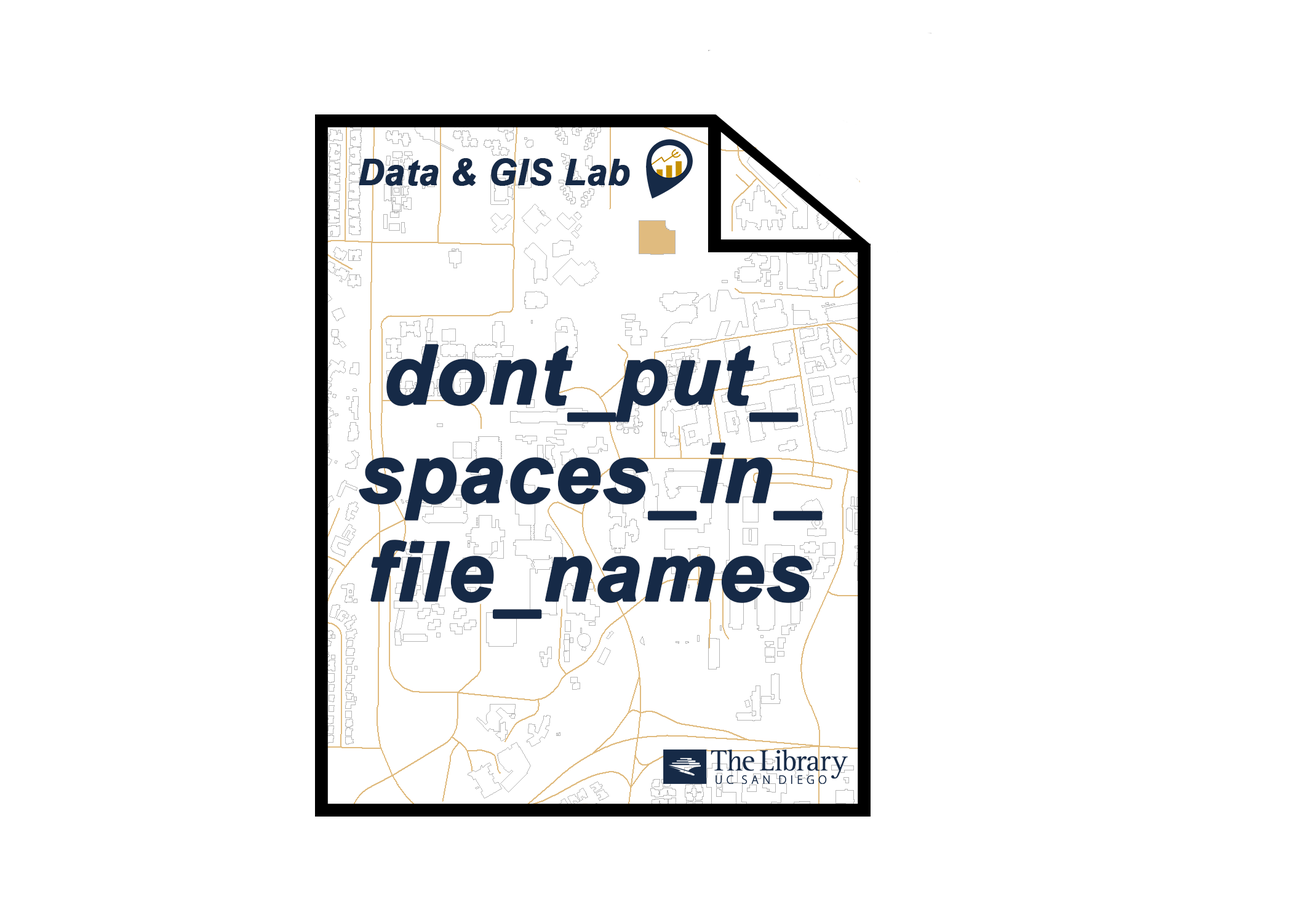
<style>
.page{position:relative;width:1292px;height:923px;background:#ffffff}
.page>*{position:absolute;margin:0}
.t1{font:35.9px "Arial-BoldItalicMT";color:#162a47;font-weight:bold}
.t2{font:82px "Arial-BoldItalicMT";color:#162a47;font-weight:bold}
</style>
<div class="page">
<p class="t1" style="left:359px;top:158px;width:271px;height:28px">Data &amp; GIS Lab</p>
<p class="t2" style="left:359px;top:344px;width:464px;height:275px;text-align:center">dont_put_<br>spaces_in_<br>file_names</p>
</div>
